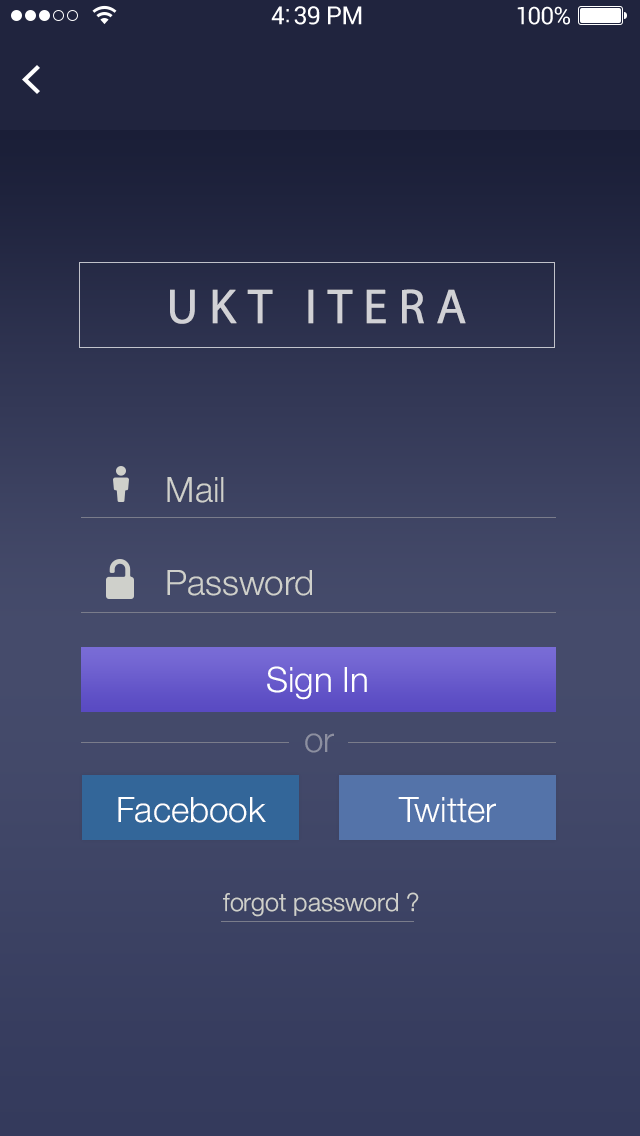
<style>
.page{position:relative;width:640px;height:1136px}
.page>*{position:absolute;margin:0}
.t1{font:49px "MyriadPro-Regular";letter-spacing:0.2em;color:#d1d1d5;font-weight:bold}
.t2{font:35px "HelveticaNeue-Light";color:#cfd0cb}
.t3{font:35px "HelveticaNeue-Light";color:#ffffff}
.t4{font:35px "HelveticaNeue-Light";color:#8c8fa0}
.t5{font:25px "HelveticaNeue-Light";color:#cfd0cb}
</style>
<div class="page">
<p class="t1" style="left:170px;top:289px;width:296px;height:35px">UKT ITERA</p>
<p class="t2" style="left:167px;top:477px;width:57px;height:26px">Mail</p>
<p class="t2" style="left:167px;top:570px;width:145px;height:26px">Password</p>
<p class="t3" style="left:267px;top:666px;width:100px;height:34px">Sign In</p>
<p class="t4" style="left:305px;top:733px;width:29px;height:20px">or</p>
<p class="t3" style="left:118px;top:797px;width:148px;height:26px">Facebook</p>
<p class="t3" style="left:398px;top:797px;width:98px;height:26px">Twitter</p>
<p class="t5" style="left:223px;top:892px;width:196px;height:25px">forgot password ?</p>
</div>
